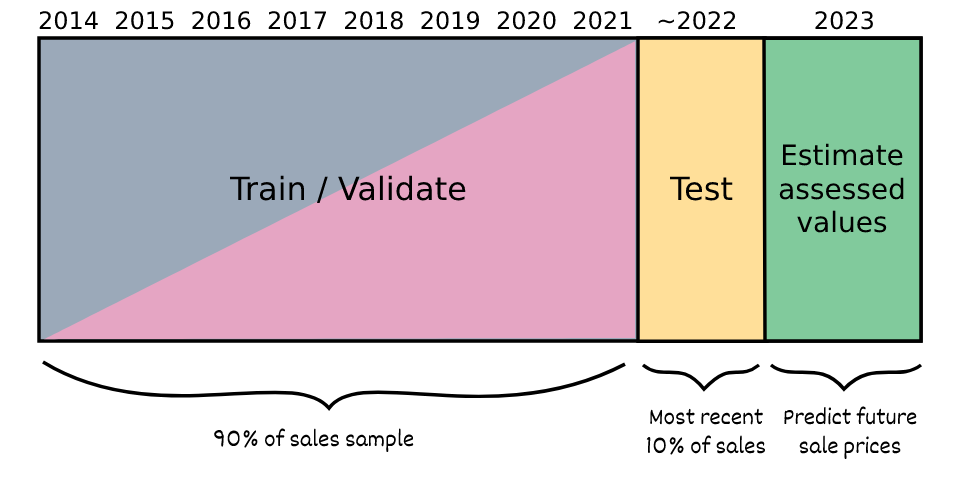
<style>
.page{position:relative;width:960px;height:480px;background:#ffffff}
.page>*{position:absolute;margin:0}
.t1{font:24px "DejaVuSans";color:#000000}
.t2{font:28px "DejaVuSans";color:#000000}
.t3{font:32px "DejaVuSans";color:#000000}
.t4{font:24px "Dekko";color:#000000}
</style>
<div class="page">
<p class="t1" style="left:39px;top:11px;width:834px;height:19px">2014  2015  2016  2017  2018  2019  2020  2021   ~2022          2023</p>
<p class="t2" style="left:779px;top:143px;width:125px;height:90px;text-align:center">Estimate<br>assessed<br>values</p>
<p class="t3" style="left:229px;top:175px;width:237px;height:28px">Train / Validate</p>
<p class="t3" style="left:669px;top:176px;width:64px;height:25px">Test</p>
<p class="t4" style="left:646px;top:408px;width:120px;height:47px;text-align:center">Most recent<br>10% of sales</p>
<p class="t4" style="left:784px;top:406px;width:133px;height:53px;text-align:center">Predict future<br>sale prices</p>
<p class="t4" style="left:214px;top:428px;width:200px;height:24px">90% of sales sample</p>
</div>
